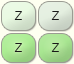
<style>
.page{position:relative;width:74px;height:64px}
.page>*{position:absolute;margin:0}
.t1{font:12px "Helvetica";color:#191919}
</style>
<div class="page">
<p class="t1" style="left:14px;top:11px;width:8px;height:9px">Z</p>
<p class="t1" style="left:51px;top:11px;width:8px;height:9px">Z</p>
<p class="t1" style="left:14px;top:43px;width:8px;height:9px">Z</p>
<p class="t1" style="left:51px;top:43px;width:8px;height:9px">Z</p>
</div>
